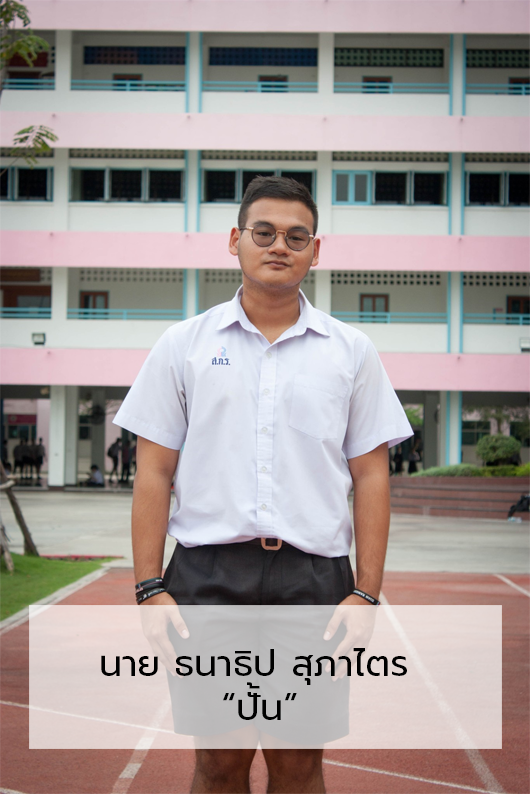
<style>
.page{position:relative;width:530px;height:794px}
.page>*{position:absolute;margin:0}
.t1{font:36.7px "Prompt-Regular";color:#000000}
.t2{font:36.7px "Prompt-Regular";letter-spacing:0.02em;color:#000000}
</style>
<div class="page">
<p class="t1" style="left:101px;top:648px;width:306px;height:72px">นาย ธนาธิป สุภาไตร<br>         “ปั<span class="t2">้</span>น”</p>
</div>
